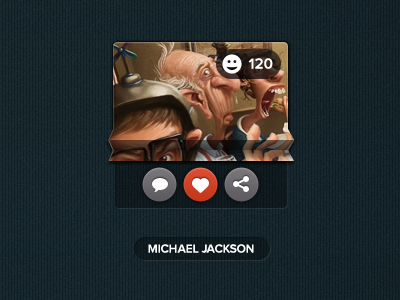
<style>
.page{position:relative;width:400px;height:300px}
.page>*{position:absolute;margin:0}
.t1{font:15px "ProximaNova-Semibold";color:#ffffff}
.t2{font:12px "ProximaNova-Semibold";color:#ffffff;text-transform:uppercase}
</style>
<div class="page">
<p class="t1" style="left:248px;top:58px;width:25px;height:11px">120</p>
<p class="t2" style="left:148px;top:244px;width:106px;height:9px">Michael Jackson</p>
</div>
